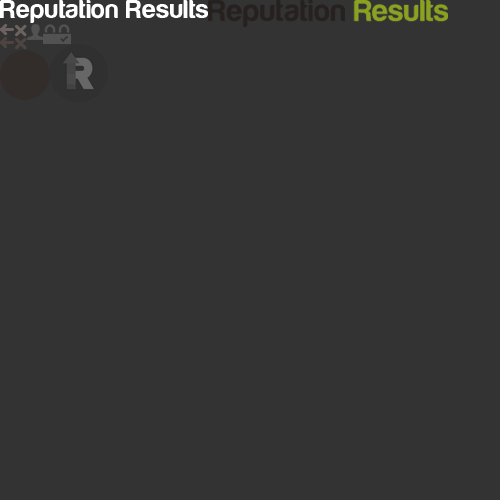
<style>
.page{position:relative;width:500px;height:500px;background:#333333}
.page>*{position:absolute;margin:0}
.t1{font:27px "Harabara-Bold";letter-spacing:0.03em;color:#ffffff}
</style>
<div class="page">
<p class="t1" style="left:0px;top:0px;width:209px;height:23px">Reputation Results</p>
</div>
